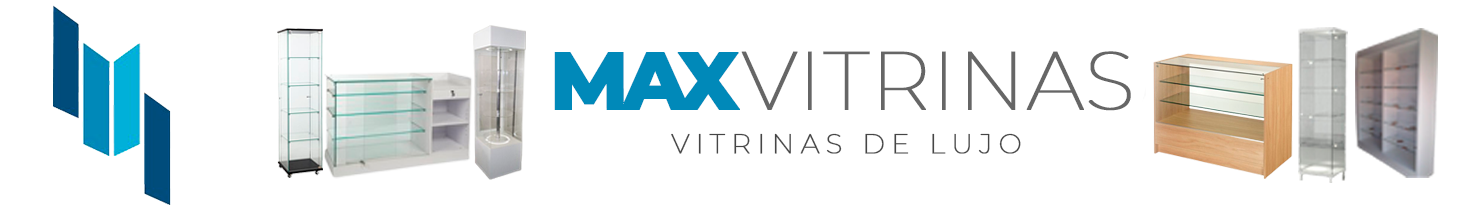
<style>
.page{position:relative;width:1479px;height:212px;background:#ffffff}
.page>*{position:absolute;margin:0}
.t1{font:82px "Montserrat-ExtraBold";letter-spacing:-0.1em;color:#0089b9;font-weight:bold}
.t2{font:82px "Montserrat-Thin";color:#666666;font-weight:bold}
.t3{font:27px "Montserrat-Thin";letter-spacing:0.22em;color:#464646;font-weight:bold}
</style>
<div class="page">
<p class="t1" style="left:554px;top:52px;width:186px;height:58px">MAX</p>
<p class="t2" style="left:741px;top:51px;width:390px;height:60px">VITRINAS</p>
<p class="t3" style="left:671px;top:133px;width:350px;height:21px">VITRINAS DE LUJO</p>
</div>
